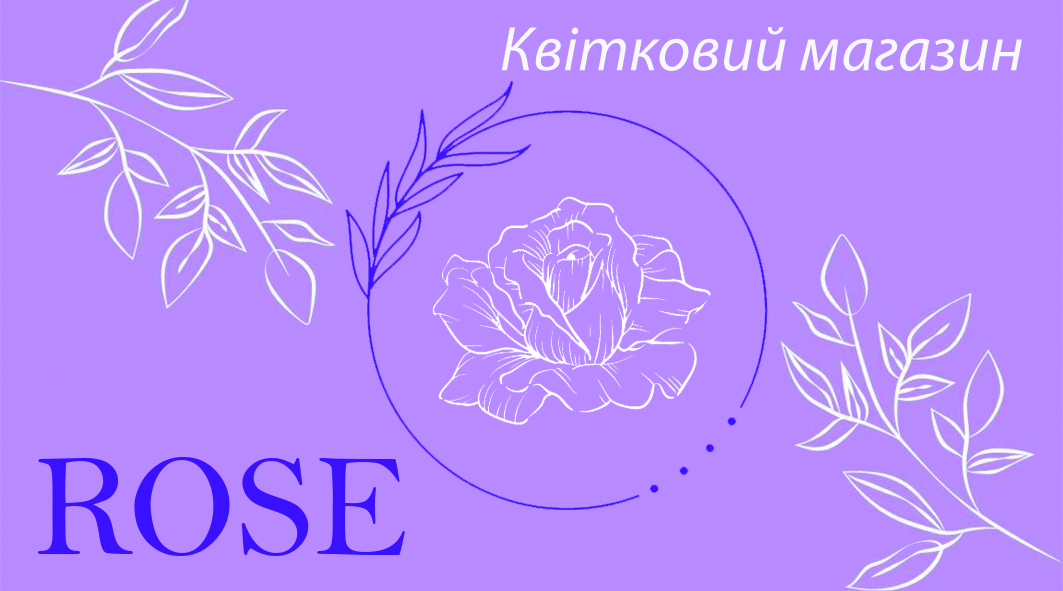
<style>
.page{position:relative;width:1063px;height:591px;background:#b88aff}
.page>*{position:absolute;margin:0}
.t1{font:63.5px "MyriadPro-It";color:#f6f8fa}
.t2{font:148.2px "BellMT";color:#3911ff}
</style>
<div class="page">
<p class="t1" style="left:501px;top:27px;width:521px;height:44px">Квітковий магазин</p>
<p class="t2" style="left:37px;top:457px;width:368px;height:99px">ROSE</p>
</div>
